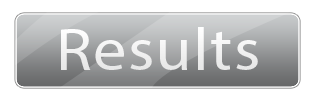
<style>
.page{position:relative;width:320px;height:100px;background:#ffffff}
.page>*{position:absolute;margin:0}
.t1{font:59.6px "MyriadPro-Regular";letter-spacing:0.02em;color:#f1f1f1;scale:1.12 1}
</style>
<div class="page">
<p class="t1" style="left:61px;top:27px;width:197px;height:43px">Results</p>
</div>
